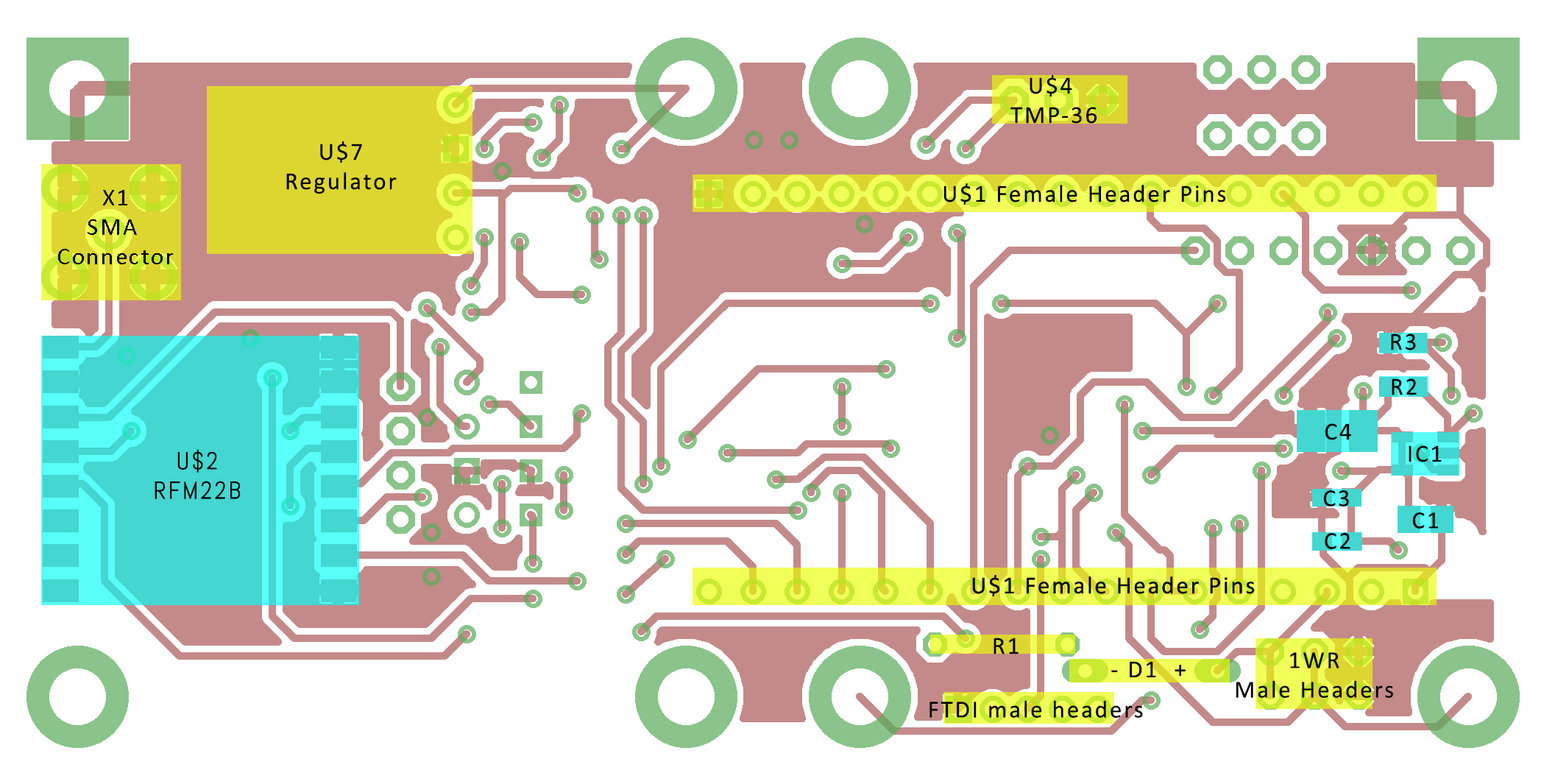
<style>
.page{position:relative;width:1544px;height:773px;background:#ffffff}
.page>*{position:absolute;margin:0}
.t1{font:24.5px "Calibri";letter-spacing:0.08em;color:#000000}
.t2{font:24.5px "Abel-Regular";letter-spacing:0.08em;color:#000000}
</style>
<div class="page">
<p class="t1" style="left:1010px;top:75px;width:86px;height:49px;text-align:center">U$4 <br>TMP-36</p>
<p class="t1" style="left:286px;top:141px;width:111px;height:52px;text-align:center">U$7<br>Regulator</p>
<p class="t1" style="left:943px;top:183px;width:283px;height:22px">U$1 Female Header Pins</p>
<p class="t1" style="left:58px;top:190px;width:115px;height:74px;text-align:center">X1<br>SMA <br>Connector</p>
<p class="t1" style="left:1391px;top:333px;width:25px;height:17px">R3</p>
<p class="t1" style="left:1391px;top:378px;width:25px;height:17px">R2</p>
<p class="t1" style="left:1324px;top:423px;width:27px;height:17px">C4</p>
<p class="t2" style="left:155px;top:449px;width:86px;height:50px;text-align:center">U$2<br>RFM22B</p>
<p class="t1" style="left:1408px;top:445px;width:33px;height:17px">IC1</p>
<p class="t1" style="left:1323px;top:490px;width:26px;height:16px">C3</p>
<p class="t1" style="left:1412px;top:512px;width:26px;height:16px">C1</p>
<p class="t1" style="left:1324px;top:533px;width:26px;height:16px">C2</p>
<p class="t1" style="left:993px;top:637px;width:25px;height:17px">R1</p>
<p class="t1" style="left:1235px;top:652px;width:158px;height:45px;text-align:center">1WR<br>Male Headers</p>
<p class="t1" style="left:1111px;top:661px;width:74px;height:16px">- D1  +</p>
<p class="t1" style="left:929px;top:700px;width:214px;height:17px">FTDI male headers</p>
</div>
